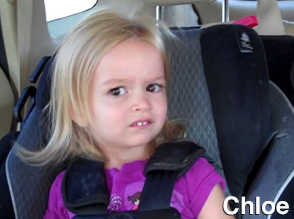
<style>
.page{position:relative;width:294px;height:219px}
.page>*{position:absolute;margin:0}
.t1{font:24px "Helvetica-Bold";color:#ffffff}
</style>
<div class="page">
<p class="t1" style="left:223px;top:196px;width:66px;height:19px">Chloe</p>
</div>
